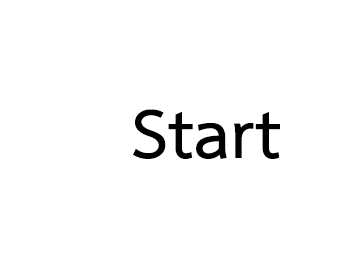
<style>
.page{position:relative;width:364px;height:267px;background:#ffffff}
.page>*{position:absolute;margin:0}
.t1{font:100px "THSarabunPSK-Bold";color:#000000}
</style>
<div class="page">
<p class="t1" style="left:133px;top:109px;width:147px;height:50px">Start</p>
</div>
